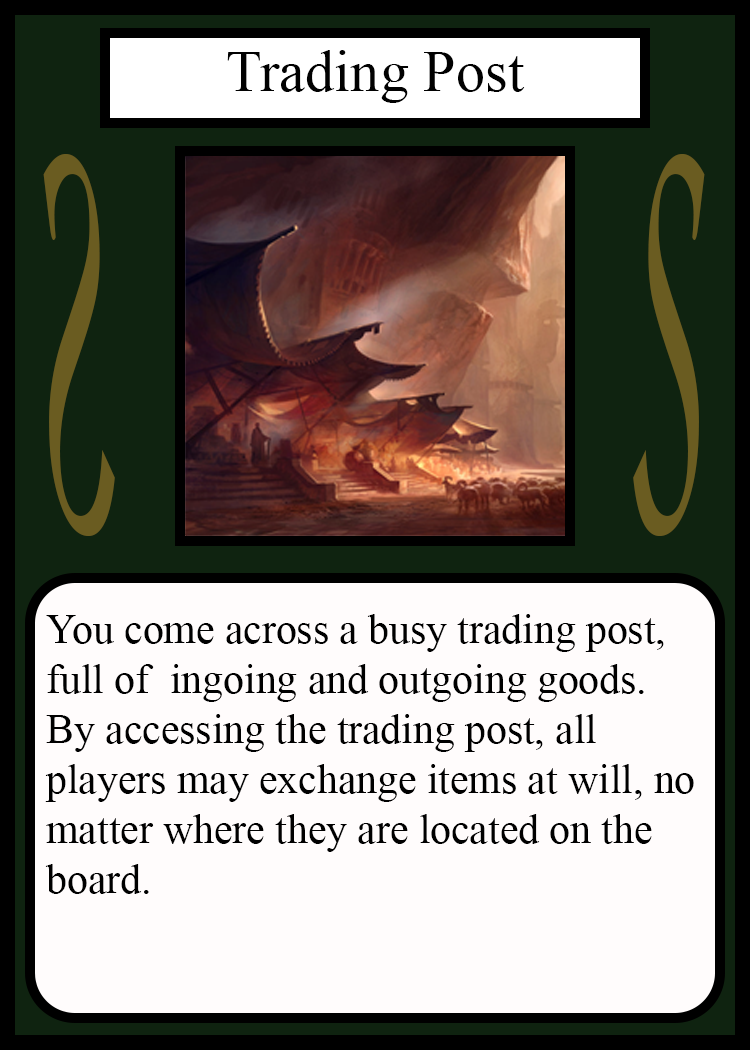
<style>
.page{position:relative;width:750px;height:1050px;background:#fffcfc}
.page>*{position:absolute;margin:0}
.t1{font:58.3px "TimesNewRomanPSMT";color:#010101}
.t2{font:548.5px "Apple-Chancery";color:#6a5c21;scale:0.27 1}
.t3{font:548.2px "Apple-Chancery";color:#6a5c21;scale:0.27 1}
.t4{font:41.7px "TimesNewRomanPSMT";color:#000000}
</style>
<div class="page">
<p class="t1" style="left:227px;top:50px;width:298px;height:53px">Trading Post</p>
<p class="t2" style="left:43px;top:154px;width:72px;height:382px;rotate:180deg">S</p>
<p class="t3" style="left:633px;top:154px;width:72px;height:382px">S</p>
<p class="t4" style="left:45px;top:614px;width:649px;height:280px">You come across a busy trading post,<br>full of  ingoing and outgoing goods.  <br>By accessing the trading post, all <br>players may exchange items at will, no<br>matter where they are located on the <br>board.</p>
</div>
